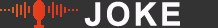
<style>
.page{position:relative;width:218px;height:28px;background:#333333}
.page>*{position:absolute;margin:0}
.t1{font:32px "Arial-BoldMT";letter-spacing:0.075em;color:#fdfafd;font-weight:bold}
</style>
<div class="page">
<p class="t1" style="left:84px;top:1px;width:96px;height:26px">JOKE</p>
</div>
